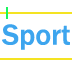
<style>
.page{position:relative;width:72px;height:72px;background:#ffffff}
.page>*{position:absolute;margin:0}
.t1{font:30px "FranklinGothic-Medium";color:#3da5ee}
</style>
<div class="page">
<p class="t1" style="left:2px;top:24px;width:68px;height:26px">Sport</p>
</div>
